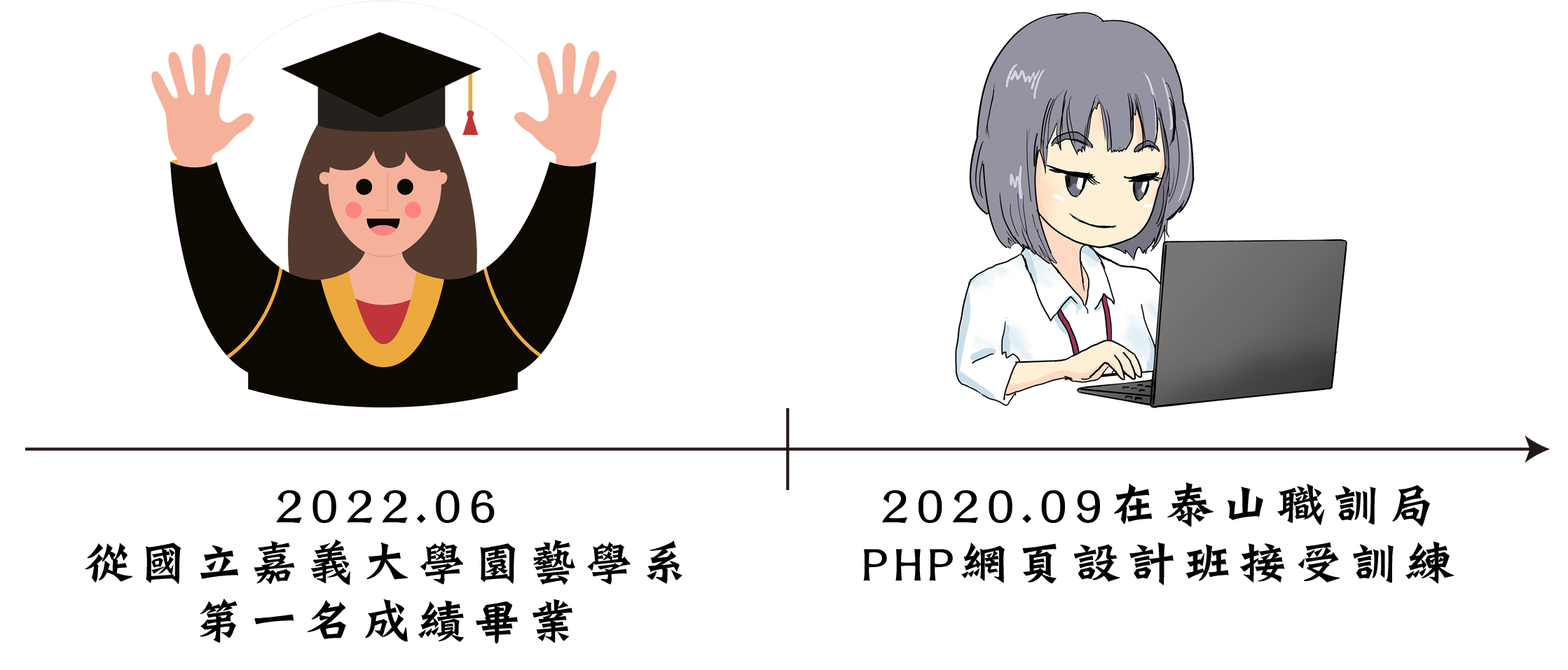
<style>
.page{position:relative;width:1568px;height:670px;background:#ffffff}
.page>*{position:absolute;margin:0}
.t1{font:52.5px/58.4px "DFLungMenStd-W9";letter-spacing:0.06em;color:#000000}
</style>
<div class="page">
<p class="t1" style="left:863px;top:483px;width:591px;height:103px;text-align:center">2020.09在泰山職訓局<br>PHP網頁設計班接受訓練</p>
<p class="t1" style="left:85px;top:490px;width:597px;height:155px;text-align:center">2022.06<br>從國立嘉義大學園藝學系<br>第一名成績畢業</p>
</div>
